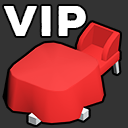
<style>
.page{position:relative;width:128px;height:128px;background:#333333}
.page>*{position:absolute;margin:0}
.t1{font:42px "SVN-NexaRushSansBlack";letter-spacing:0.05em;color:#ffffff;text-transform:uppercase}
</style>
<div class="page">
<p class="t1" style="left:4px;top:6px;width:82px;height:30px">VIP</p>
</div>
